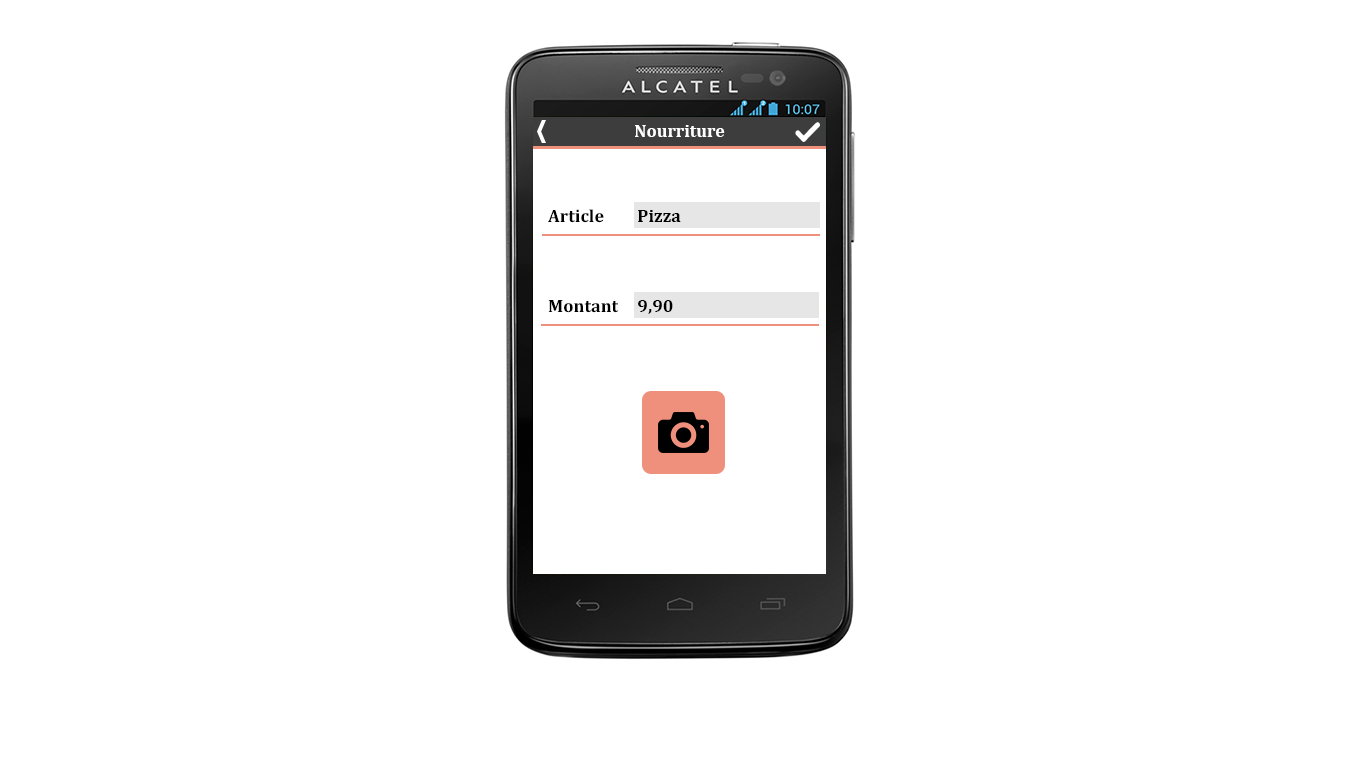
<style>
.page{position:relative;width:1366px;height:768px;background:#ffffff}
.page>*{position:absolute;margin:0}
.t1{font:18px "Cambria-Bold";color:#ffffff}
.t2{font:18.1px "Cambria-Bold";color:#000000}
.t3{font:18px "Cambria-Bold";color:#000000}
</style>
<div class="page">
<p class="t1" style="left:635px;top:125px;width:90px;height:12px">Nourriture</p>
<p class="t2" style="left:548px;top:209px;width:56px;height:14px">Article</p>
<p class="t3" style="left:638px;top:210px;width:43px;height:12px">Pizza</p>
<p class="t2" style="left:548px;top:300px;width:71px;height:13px">Montant</p>
<p class="t3" style="left:638px;top:300px;width:35px;height:14px">9,90</p>
</div>
